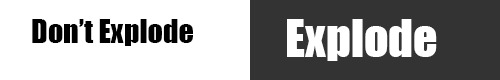
<style>
.page{position:relative;width:500px;height:80px;background:#ffffff}
.page>*{position:absolute;margin:0}
.t1{font:30px "Impact";color:#000000}
.t2{font:48px "Impact";color:#ffffff}
</style>
<div class="page">
<p class="t1" style="left:32px;top:19px;width:161px;height:27px">Don’t Explode</p>
<p class="t2" style="left:287px;top:19px;width:150px;height:42px">Explode</p>
</div>
